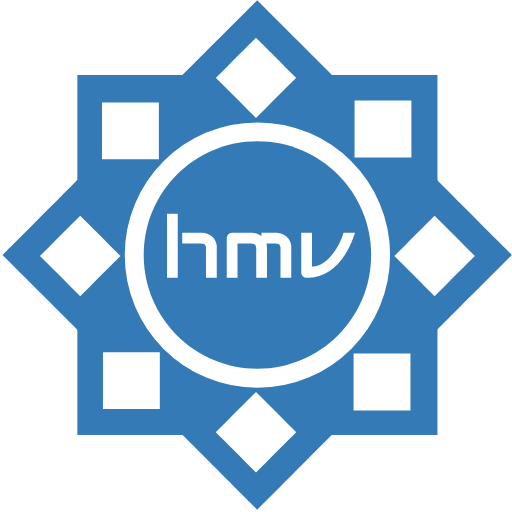
<style>
.page{position:relative;width:512px;height:512px;background:#ffffff}
.page>*{position:absolute;margin:0}
.t1{font:85.3px "Audiowide-Regular";color:#ffffff}
</style>
<div class="page">
<p class="t1" style="left:167px;top:213px;width:188px;height:65px">hmv</p>
</div>
